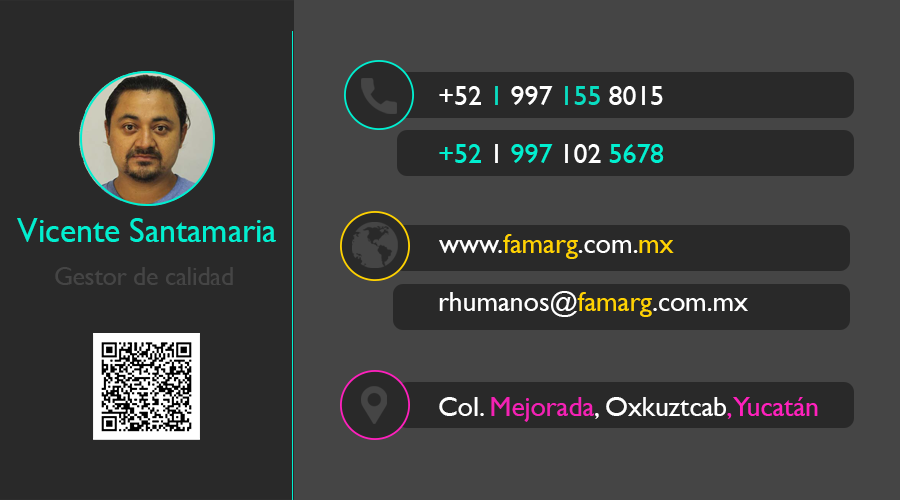
<style>
.page{position:relative;width:900px;height:500px;background:#292929}
.page>*{position:absolute;margin:0}
.t1{font:28.2px "GillSansMT";letter-spacing:-0.01em;color:#ffffff}
.t2{font:28.2px "GillSansMT";letter-spacing:-0.01em;color:#08ddc1}
.t3{font:28.2px "GillSansMT";letter-spacing:-0.01em;color:#00efd0}
.t4{font:34.4px "GillSansMT";letter-spacing:-0.01em;color:#00efd0}
.t5{font:28.2px "GillSansMT";letter-spacing:-0.01em;color:#ffd200}
.t6{font:25.6px "GillSansMT";letter-spacing:-0.01em;color:#454545}
.t7{font:28.2px "GillSansMT";letter-spacing:-0.01em;color:#f421b5}
.t8{font:28.2px "GillSansMT";letter-spacing:-0.01em;color:#ff20bd}
</style>
<div class="page">
<p class="t1" style="left:439px;top:86px;width:224px;height:19px">+52 <span class="t2">1</span> 997 <span class="t2">155</span> 8015</p>
<p class="t3" style="left:439px;top:144px;width:225px;height:19px">+52 <span class="t1">1</span> 997 <span class="t1">102</span> 5678</p>
<p class="t4" style="left:17px;top:218px;width:259px;height:24px">Vicente Santamaria</p>
<p class="t5" style="left:439px;top:234px;width:235px;height:25px"><span class="t1">www.</span>famarg<span class="t1">.com.</span>mx</p>
<p class="t6" style="left:55px;top:267px;width:178px;height:18px">Gestor de calidad</p>
<p class="t1" style="left:439px;top:291px;width:309px;height:26px">rhumanos@<span class="t5">famarg</span>.com.mx</p>
<p class="t1" style="left:439px;top:397px;width:379px;height:25px">Col. <span class="t7">Mejorada</span>, Oxkuztcab<span class="t8">, Yucatán</span></p>
</div>
